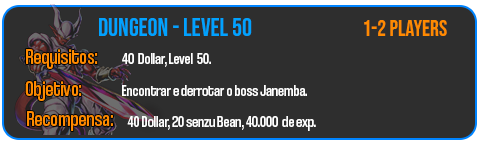
<style>
.page{position:relative;width:480px;height:145px;background:#2e2e2e}
.page>*{position:absolute;margin:0}
.t1{font:25px "BebasNeue-Regular";color:#00a2ff}
.t2{font:22px "BebasNeue-Regular";color:#ff8a00}
.t3{font:22px "CoolveticaCondensedRg-Regular";color:#ff8a00}
.t4{font:16.7px "CoolveticaCondensedRg-Regular";color:#ffffff}
</style>
<div class="page">
<p class="t1" style="left:99px;top:18px;width:153px;height:18px">Dungeon - LEVEL 50</p>
<p class="t2" style="left:364px;top:20px;width:83px;height:16px">1-2 Players</p>
<p class="t3" style="left:26px;top:49px;width:72px;height:20px">Requisitos:</p>
<p class="t4" style="left:122px;top:53px;width:89px;height:14px">40  Dollar, Level  50.</p>
<p class="t3" style="left:25px;top:81px;width:57px;height:20px">Objetivo:</p>
<p class="t4" style="left:122px;top:85px;width:185px;height:11px">Encontrar e derrotar o boss Janemba.</p>
<p class="t3" style="left:27px;top:111px;width:86px;height:20px">Recompensa:</p>
<p class="t4" style="left:127px;top:116px;width:189px;height:15px">40 Dollar, 20 senzu Bean, 40.000  de exp.</p>
</div>
